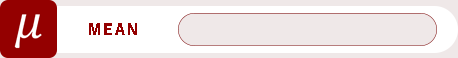
<style>
.page{position:relative;width:458px;height:58px;background:#efe8e8}
.page>*{position:absolute;margin:0}
.t1{font:17.7px "WorkSansRoman-Bold";letter-spacing:0.15em;color:#940000;scale:0.82 1}
</style>
<div class="page">
<p class="t1" style="left:89px;top:23px;width:48px;height:12px">MEAN</p>
</div>
